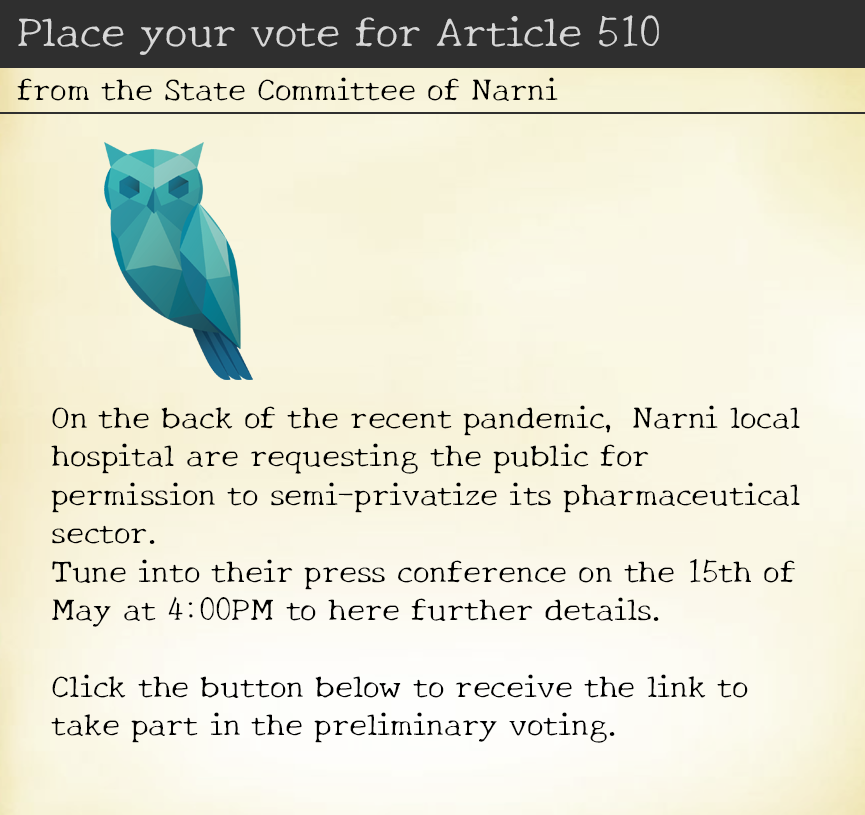
<style>
.page{position:relative;width:865px;height:815px}
.page>*{position:absolute;margin:0}
.t1{font:42.7px "NewTegomin-Regular";color:#d7d7d7}
.t2{font:32px "NewTegomin-Regular";color:#000000}
</style>
<div class="page">
<p class="t1" style="left:18px;top:15px;width:641px;height:40px">Place your vote for Article 510</p>
<p class="t2" style="left:17px;top:77px;width:541px;height:24px">from the State Committee of Narni</p>
<p class="t2" style="left:51px;top:405px;width:749px;height:338px">On the back of the recent pandemic, Narni local hospital are requesting the public for permission to semi-privatize its pharmaceutical sector. <br>Tune into their press conference on the 15th of May at 4:00PM to here further details.<br><br>Click the button below to receive the link to take part in the preliminary voting.</p>
</div>
